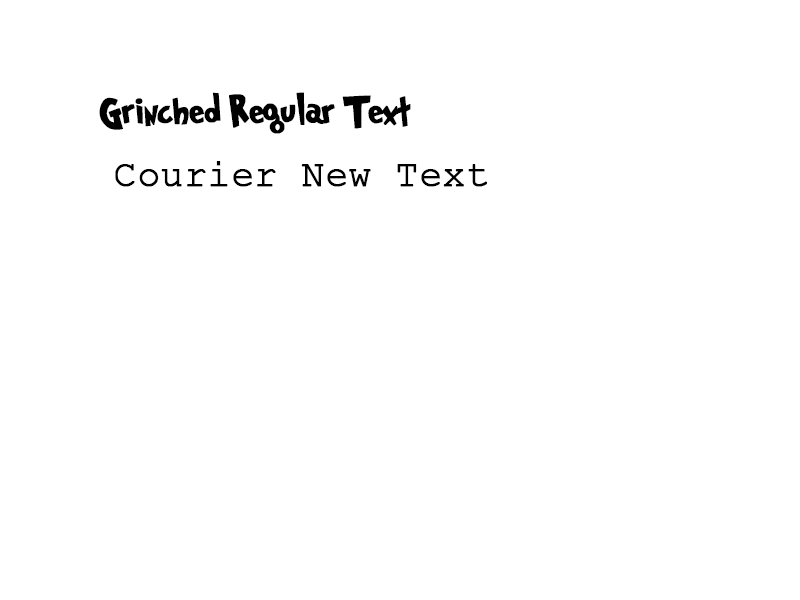
<style>
.page{position:relative;width:800px;height:600px;background:#ffffff}
.page>*{position:absolute;margin:0}
.t1{font:37.5px "Grinched";color:#000000;font-weight:bold}
.t2{font:37.5px "CourierNewPSMT";color:#000000;font-weight:bold}
</style>
<div class="page">
<p class="t1" style="left:99px;top:92px;width:312px;height:42px">Grinched Regular Text</p>
<p class="t2" style="left:115px;top:161px;width:372px;height:26px">Courier New Text</p>
</div>
